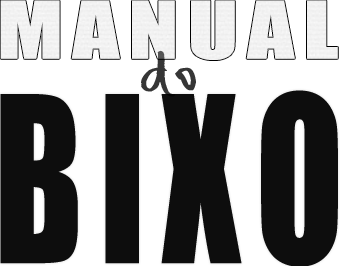
<style>
.page{position:relative;width:348px;height:266px;background:#0d0d0d}
.page>*{position:absolute;margin:0}
.t1{font:29.4px "PeaJazzSkinny";letter-spacing:0.1em;color:#363636;scale:1.6 1}
.t2{font:213.7px "Impact";letter-spacing:0.1em;color:#000000;scale:0.75 1}
</style>
<div class="page">
<p class="t1" style="left:141px;top:50px;width:55px;height:47px">do</p>
<p class="t2" style="left:0px;top:90px;width:338px;height:177px;opacity:0.95">BIXO</p>
</div>
